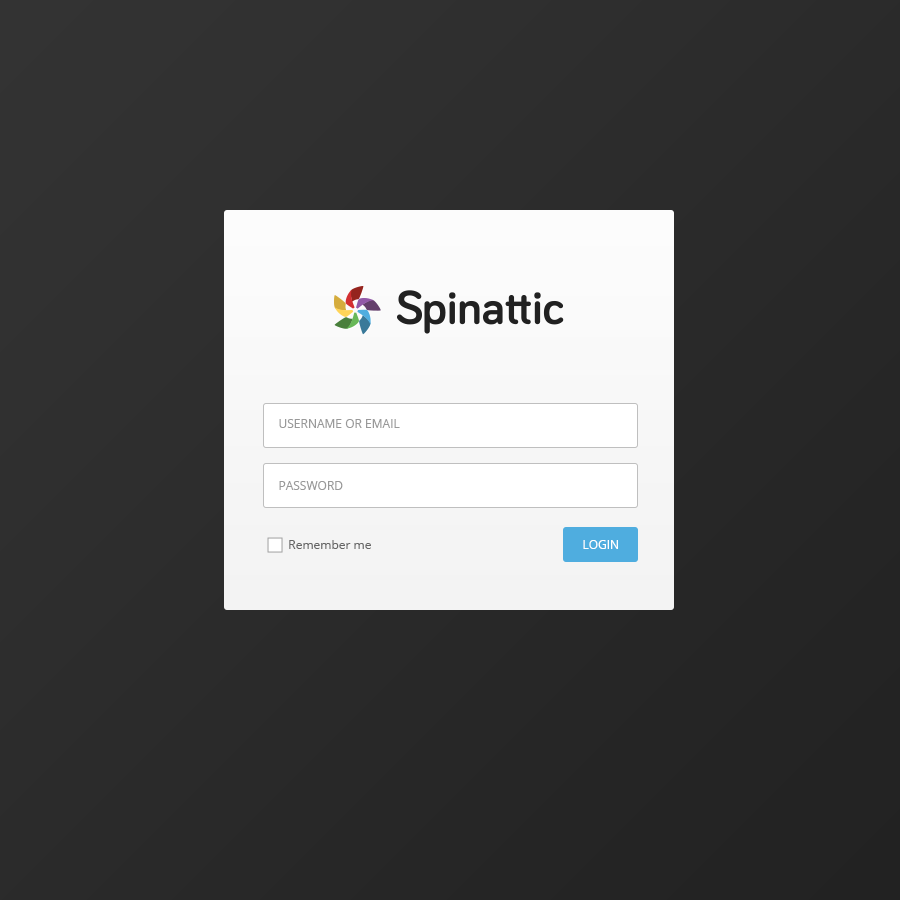
<style>
.page{position:relative;width:900px;height:900px}
.page>*{position:absolute;margin:0}
.t1{font:12px "OpenSans";color:#999999;text-transform:uppercase}
.t2{font:12px "OpenSans";color:#666666}
.t3{font:12px "OpenSans";color:#ffffff;text-transform:uppercase}
</style>
<div class="page">
<p class="t1" style="left:279px;top:419px;width:121px;height:9px">username or email</p>
<p class="t1" style="left:279px;top:481px;width:64px;height:9px">password</p>
<p class="t2" style="left:289px;top:540px;width:82px;height:9px">Remember me</p>
<p class="t3" style="left:583px;top:540px;width:35px;height:9px">Login</p>
</div>
